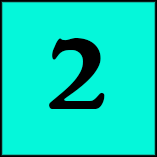
<style>
.page{position:relative;width:157px;height:157px;background:#05f7da}
.page>*{position:absolute;margin:0}
.t1{font:110px "ARJULIAN";color:#000000}
</style>
<div class="page">
<p class="t1" style="left:49px;top:38px;width:56px;height:71px">2</p>
</div>
